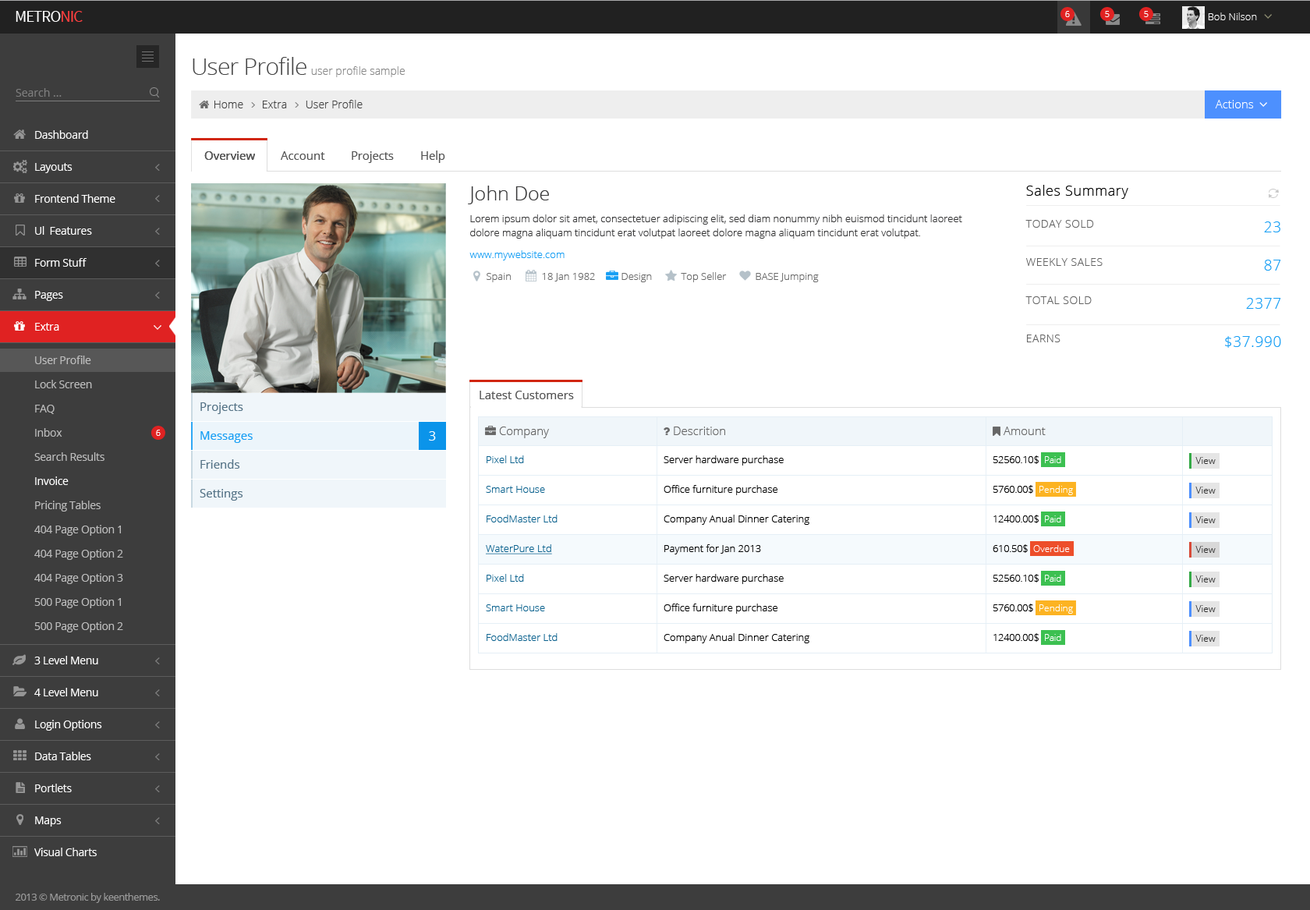
<style>
.page{position:relative;width:1310px;height:910px;background:#ffffff}
.page>*{position:absolute;margin:0}
.t1{font:16.3px "SourceSansPro-Regular";letter-spacing:-0.045em;color:#ffffff;text-transform:uppercase}
.t2{font:16.3px "SourceSansPro-Regular";letter-spacing:-0.045em;color:#ff3f3f;text-transform:uppercase}
.t3{font:8.6px "OpenSans-Light";color:#ffffff}
.t4{font:10.1px "OpenSans-Light";color:#ffffff}
.t5{font:23.4px "OpenSans-Light";letter-spacing:-0.025em;color:#444444}
.t6{font:10.9px "OpenSans-Light";color:#888888}
.t7{font:10.9px "OpenSans";color:#7d7d7d}
.t8{font:10.9px "OpenSans-Light";color:#444444}
.t9{font:11.7px "OpenSans-Light";color:#ffffff}
.t10{font:10.9px "OpenSans";letter-spacing:-0.025em;color:#ffffff}
.t11{font:11.7px "OpenSans";color:#555555}
.t12{font:11.7px "OpenSans";letter-spacing:-0.01em;color:#555555}
.t13{font:10.1px/9.4px "OpenSans-Light";color:#383839}
.t14{font:19.5px "OpenSans-Light";color:#383839}
.t15{font:10.1px/14px "OpenSans-Light";color:#383839}
.t16{font:10.1px/10.1px "OpenSans-Light";color:#169ef4}
.t17{font:14px "OpenSans-Light";letter-spacing:0.035em;color:#000000}
.t18{font:10.9px "OpenSans-Light";letter-spacing:0.035em;color:#646464;text-transform:uppercase}
.t19{font:14.8px "OpenSans-Light";letter-spacing:0.035em;color:#169ef4;text-transform:uppercase}
.t20{font:10.1px "OpenSans-Light";color:#6b6b6b}
.t21{font:10.9px "OpenSans";letter-spacing:-0.025em;color:#bdbdbd}
.t22{font:11.7px "OpenSans";color:#557386}
.t23{font:11.7px "OpenSans";color:#169ef4}
.t24{font:13.3px "OpenSans";color:#ffffff}
.t25{font:11.7px "OpenSans-Light";color:#666666}
.t26{font:10.1px "OpenSans-Light";color:#0d638f}
.t27{font:10.1px "OpenSans-Light";color:#000000}
.t28{font:10.1px "OpenSans-Light";letter-spacing:-0.025em;color:#000000}
.t29{font:9.4px "OpenSans-Light";letter-spacing:-0.025em;color:#ffffff}
.t30{font:9.6px "OpenSans-Light";color:#333333}
.t31{font:10.9px "OpenSans";letter-spacing:-0.025em;color:#fefefe}
.t32{font:9.4px "OpenSans-Light";color:#ffffff}
.t33{font:10.1px "OpenSans-Light";color:#0d638f;text-decoration:underline}
.t34{font:10.1px "OpenSans";letter-spacing:-0.04em;color:#999999}
</style>
<div class="page">
<p class="t1" style="left:16px;top:11px;width:67px;height:11px">Metro<span class="t2">nic</span></p>
<p class="t3" style="left:1065px;top:11px;width:5px;height:6px">6</p>
<p class="t3" style="left:1105px;top:11px;width:5px;height:6px">5</p>
<p class="t3" style="left:1144px;top:11px;width:5px;height:6px">5</p>
<p class="t4" style="left:1208px;top:12px;width:49px;height:8px">Bob Nilson</p>
<p class="t5" style="left:193px;top:57px;width:113px;height:18px">User Profile</p>
<p class="t6" style="left:311px;top:66px;width:94px;height:11px">user profile sample</p>
<p class="t7" style="left:16px;top:88px;width:46px;height:9px">Search ...</p>
<p class="t8" style="left:214px;top:101px;width:29px;height:7px">Home</p>
<p class="t8" style="left:263px;top:101px;width:24px;height:7px">Extra</p>
<p class="t8" style="left:306px;top:100px;width:57px;height:8px">User Profile</p>
<p class="t9" style="left:1215px;top:100px;width:39px;height:8px">Actions</p>
<p class="t10" style="left:35px;top:130px;width:53px;height:9px">Dashboard</p>
<p class="t11" style="left:204px;top:151px;width:51px;height:9px">Overview</p>
<p class="t11" style="left:204px;top:151px;width:51px;height:9px">Overview</p>
<p class="t11" style="left:281px;top:151px;width:44px;height:9px">Account</p>
<p class="t12" style="left:352px;top:151px;width:42px;height:12px">Projects</p>
<p class="t12" style="left:421px;top:151px;width:24px;height:12px">Help</p>
<p class="t10" style="left:35px;top:163px;width:38px;height:10px">Layouts</p>
<p class="t13" style="left:468px;top:186px;width:494px;height:74px"><span class="t14">John Doe<br><br></span>Lorem ipsum dolor sit amet, consectetuer adipiscing elit, sed diam nonummy nibh euismod tincidunt laoreet <span class="t15">dolore magna aliquam tincidunt erat volutpat laoreet dolore magna aliquam tincidunt erat volutpat.<br><br></span><span class="t16">www.mywebsite.com</span></p>
<p class="t17" style="left:1026px;top:185px;width:102px;height:14px">Sales Summary</p>
<p class="t10" style="left:35px;top:194px;width:80px;height:9px">Frontend Theme</p>
<p class="t18" style="left:1026px;top:220px;width:68px;height:8px">TODAY SOLD</p>
<p class="t19" style="left:1264px;top:221px;width:17px;height:11px">23</p>
<p class="t10" style="left:35px;top:226px;width:57px;height:9px">Ul  Features</p>
<p class="t10" style="left:35px;top:258px;width:52px;height:9px">Form Stuff</p>
<p class="t18" style="left:1026px;top:258px;width:77px;height:8px">WEEKLY SALES</p>
<p class="t19" style="left:1264px;top:260px;width:17px;height:11px">87</p>
<p class="t20" style="left:487px;top:273px;width:24px;height:9px">Spain</p>
<p class="t20" style="left:542px;top:273px;width:53px;height:9px">18 Jan 1982</p>
<p class="t20" style="left:622px;top:273px;width:30px;height:9px">Design</p>
<p class="t20" style="left:681px;top:272px;width:46px;height:10px">Top Seller</p>
<p class="t20" style="left:756px;top:273px;width:63px;height:9px">BASE Jumping</p>
<p class="t10" style="left:35px;top:291px;width:28px;height:10px">Pages</p>
<p class="t18" style="left:1026px;top:296px;width:66px;height:8px">TOTAL SOLD</p>
<p class="t19" style="left:1246px;top:298px;width:35px;height:11px">2377</p>
<p class="t10" style="left:35px;top:323px;width:24px;height:8px">Extra</p>
<p class="t18" style="left:1027px;top:335px;width:34px;height:7px">EARNS</p>
<p class="t19" style="left:1225px;top:336px;width:56px;height:12px">$37.990</p>
<p class="t21" style="left:35px;top:356px;width:56px;height:8px">User Profile</p>
<p class="t21" style="left:35px;top:380px;width:57px;height:8px">Lock Screen</p>
<p class="t11" style="left:480px;top:391px;width:94px;height:8px">Latest Customers</p>
<p class="t21" style="left:35px;top:405px;width:20px;height:9px">FAQ</p>
<p class="t22" style="left:200px;top:402px;width:43px;height:12px">Projects</p>
<p class="t21" style="left:35px;top:428px;width:27px;height:9px">Inbox</p>
<p class="t3" style="left:156px;top:430px;width:5px;height:6px">6</p>
<p class="t23" style="left:200px;top:431px;width:53px;height:12px">Messages</p>
<p class="t24" style="left:429px;top:431px;width:7px;height:10px">3</p>
<p class="t25" style="left:499px;top:427px;width:50px;height:11px">Company</p>
<p class="t25" style="left:674px;top:427px;width:51px;height:8px">Descrition</p>
<p class="t25" style="left:1004px;top:427px;width:42px;height:8px">Amount</p>
<p class="t21" style="left:34px;top:452px;width:71px;height:9px">Search Results</p>
<p class="t22" style="left:200px;top:459px;width:40px;height:10px">Friends</p>
<p class="t26" style="left:487px;top:455px;width:37px;height:8px">Pixel Ltd</p>
<p class="t27" style="left:664px;top:455px;width:120px;height:11px">Server hardware purchase</p>
<p class="t28" style="left:993px;top:455px;width:46px;height:9px">52560.10$</p>
<p class="t29" style="left:1045px;top:456px;width:16px;height:7px">Paid</p>
<p class="t30" style="left:1196px;top:457px;width:20px;height:7px">View</p>
<p class="t31" style="left:35px;top:477px;width:34px;height:8px">Invoice</p>
<p class="t26" style="left:486px;top:486px;width:59px;height:7px">Smart House</p>
<p class="t27" style="left:664px;top:485px;width:114px;height:10px">Office furniture purchase</p>
<p class="t28" style="left:993px;top:485px;width:40px;height:9px">5760.00$</p>
<p class="t32" style="left:1040px;top:486px;width:33px;height:9px">Pending</p>
<p class="t22" style="left:200px;top:489px;width:43px;height:12px">Settings</p>
<p class="t30" style="left:1196px;top:487px;width:20px;height:7px">View</p>
<p class="t21" style="left:35px;top:501px;width:66px;height:11px">Pricing Tables</p>
<p class="t26" style="left:487px;top:515px;width:71px;height:8px">FoodMaster Ltd</p>
<p class="t27" style="left:664px;top:515px;width:146px;height:10px">Company Anual Dinner Catering</p>
<p class="t28" style="left:994px;top:515px;width:45px;height:8px">12400.00$</p>
<p class="t29" style="left:1045px;top:515px;width:16px;height:8px">Paid</p>
<p class="t30" style="left:1196px;top:516px;width:20px;height:7px">View</p>
<p class="t21" style="left:34px;top:525px;width:87px;height:11px">404 Page Option 1</p>
<p class="t33" style="left:486px;top:544px;width:66px;height:10px">WaterPure Ltd</p>
<p class="t27" style="left:664px;top:544px;width:97px;height:10px">Payment for Jan 2013</p>
<p class="t28" style="left:993px;top:544px;width:35px;height:9px">610.50$</p>
<p class="t32" style="left:1033px;top:545px;width:37px;height:7px">Overdue</p>
<p class="t30" style="left:1196px;top:546px;width:20px;height:7px">View</p>
<p class="t21" style="left:34px;top:549px;width:89px;height:11px">404 Page Option 2</p>
<p class="t21" style="left:34px;top:573px;width:89px;height:11px">404 Page Option 3</p>
<p class="t26" style="left:487px;top:574px;width:37px;height:8px">Pixel Ltd</p>
<p class="t27" style="left:664px;top:574px;width:120px;height:10px">Server hardware purchase</p>
<p class="t28" style="left:993px;top:574px;width:46px;height:9px">52560.10$</p>
<p class="t29" style="left:1045px;top:575px;width:16px;height:7px">Paid</p>
<p class="t30" style="left:1196px;top:576px;width:20px;height:7px">View</p>
<p class="t21" style="left:34px;top:597px;width:87px;height:11px">500 Page Option 1</p>
<p class="t26" style="left:486px;top:604px;width:59px;height:7px">Smart House</p>
<p class="t27" style="left:664px;top:604px;width:114px;height:10px">Office furniture purchase</p>
<p class="t28" style="left:993px;top:604px;width:40px;height:8px">5760.00$</p>
<p class="t32" style="left:1040px;top:604px;width:33px;height:10px">Pending</p>
<p class="t30" style="left:1196px;top:605px;width:20px;height:7px">View</p>
<p class="t21" style="left:34px;top:622px;width:89px;height:10px">500 Page Option 2</p>
<p class="t26" style="left:487px;top:633px;width:71px;height:8px">FoodMaster Ltd</p>
<p class="t27" style="left:664px;top:633px;width:146px;height:10px">Company Anual Dinner Catering</p>
<p class="t28" style="left:994px;top:633px;width:45px;height:9px">12400.00$</p>
<p class="t29" style="left:1045px;top:634px;width:16px;height:7px">Paid</p>
<p class="t30" style="left:1196px;top:635px;width:20px;height:7px">View</p>
<p class="t10" style="left:34px;top:656px;width:64px;height:8px">3 Level Menu</p>
<p class="t10" style="left:34px;top:688px;width:64px;height:8px">4 Level Menu</p>
<p class="t10" style="left:35px;top:720px;width:67px;height:11px">Login Options</p>
<p class="t10" style="left:35px;top:752px;width:56px;height:8px">Data Tables</p>
<p class="t10" style="left:35px;top:784px;width:37px;height:8px">Portlets</p>
<p class="t10" style="left:35px;top:817px;width:27px;height:10px">Maps</p>
<p class="t10" style="left:34px;top:848px;width:63px;height:8px">Visual Charts</p>
<p class="t34" style="left:16px;top:893px;width:144px;height:10px">2013 © Metronic by keenthemes.</p>
</div>
